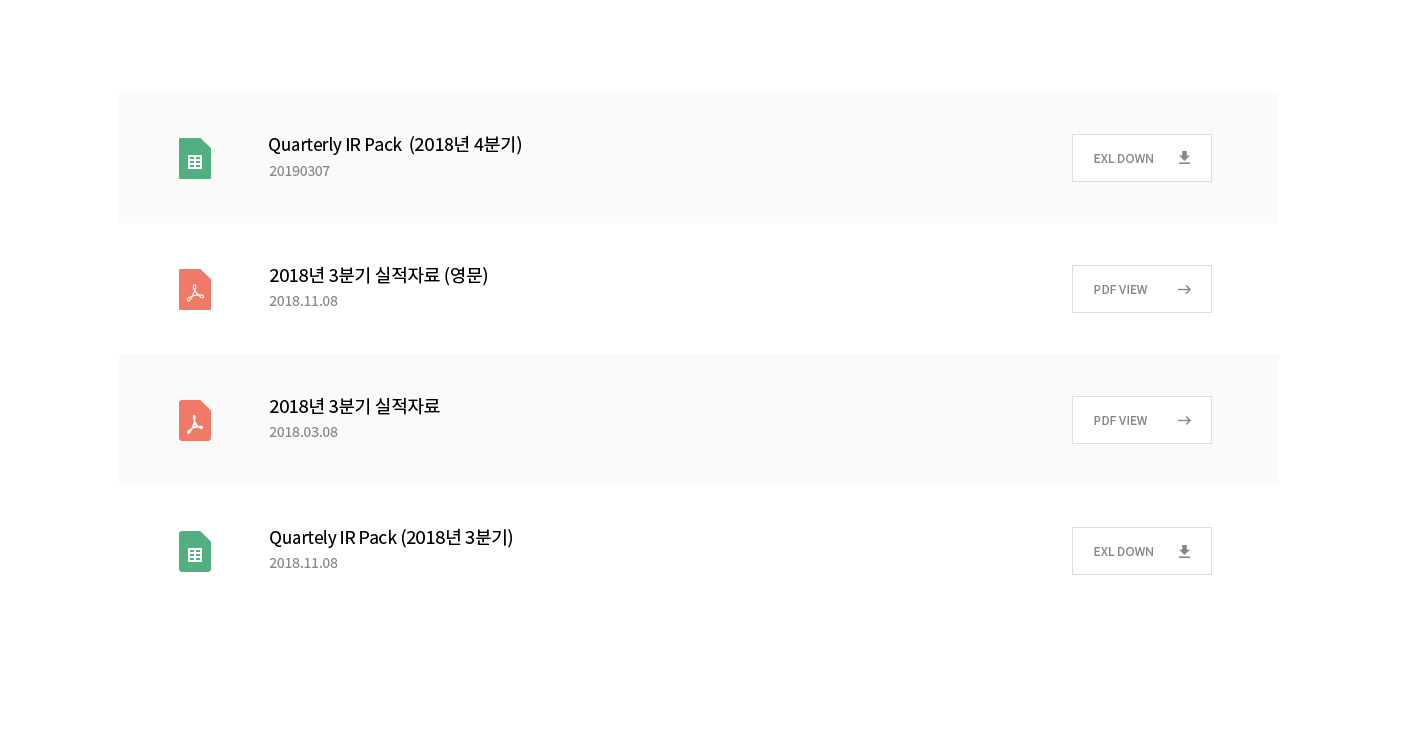
<style>
.page{position:relative;width:1402px;height:729px;background:#ffffff}
.page>*{position:absolute;margin:0}
.t1{font:17px "NotoSansKR-Regular";letter-spacing:-0.013em;color:#000000}
.t2{font:18px "NotoSansKR-Regular";letter-spacing:-0.013em;color:#000000}
.t3{font:12px "NotoSansKR-Regular";letter-spacing:0.01em;color:#888888}
.t4{font:14px "NotoSansKR-Regular";letter-spacing:-0.013em;color:#888888}
</style>
<div class="page">
<p class="t1" style="left:269px;top:135px;width:252px;height:20px">Quarterly IR Pack  <span class="t2">(2018년 4분기)</span></p>
<p class="t3" style="left:1094px;top:154px;width:59px;height:9px">EXL DOWN</p>
<p class="t4" style="left:269px;top:166px;width:61px;height:10px">20190307</p>
<p class="t2" style="left:270px;top:266px;width:217px;height:20px">2018년 3분기 실적자료 (영문)</p>
<p class="t3" style="left:1094px;top:285px;width:54px;height:9px">PDF VIEW</p>
<p class="t4" style="left:269px;top:296px;width:69px;height:10px">2018.11.08</p>
<p class="t2" style="left:270px;top:397px;width:170px;height:18px">2018년 3분기 실적자료</p>
<p class="t3" style="left:1094px;top:416px;width:54px;height:9px">PDF VIEW</p>
<p class="t4" style="left:269px;top:427px;width:69px;height:10px">2018.03.08</p>
<p class="t1" style="left:270px;top:528px;width:242px;height:20px">Quartely IR Pack<span class="t2"> (2018년 3분기)</span></p>
<p class="t4" style="left:269px;top:558px;width:69px;height:10px">2018.11.08</p>
<p class="t3" style="left:1094px;top:547px;width:59px;height:9px">EXL DOWN</p>
</div>
